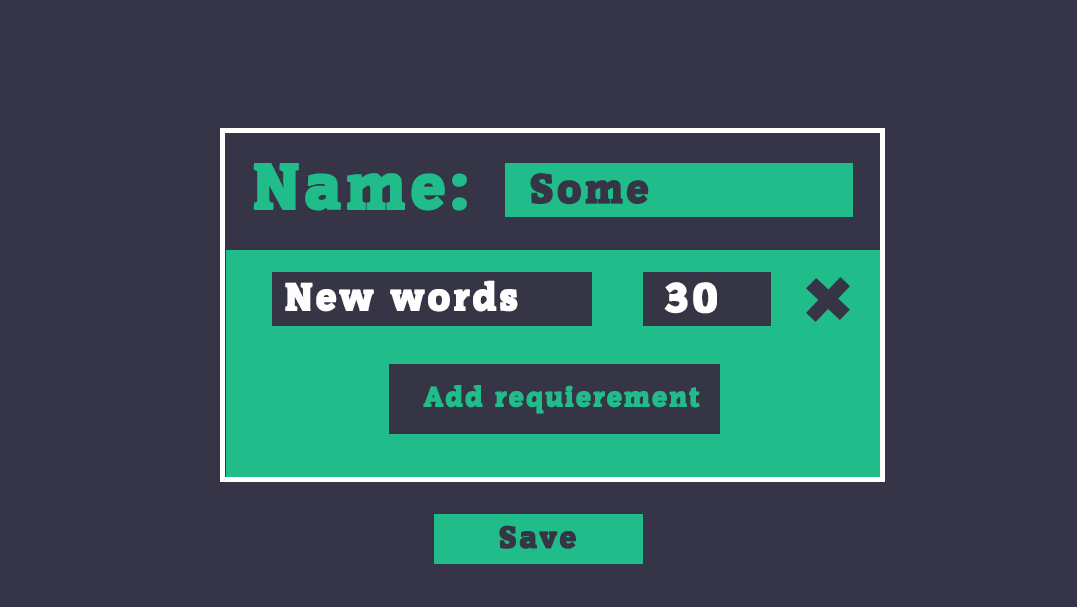
<style>
.page{position:relative;width:1077px;height:607px;background:#363547}
.page>*{position:absolute;margin:0}
.t1{font:62.4px "Commons";letter-spacing:0.07em;color:#20bc8a;font-weight:bold}
.t2{font:40px "Commons";letter-spacing:0.07em;color:#363546;font-weight:bold}
.t3{font:37.4px "Commons";letter-spacing:0.07em;color:#fefefe;font-weight:bold}
.t4{font:40px "Commons";letter-spacing:0.07em;color:#ffffff;font-weight:bold}
.t5{font:27.1px "Commons";letter-spacing:0.07em;color:#20bc8a;font-weight:bold}
.t6{font:30px "Commons";letter-spacing:0.07em;color:#363546;font-weight:bold}
</style>
<div class="page">
<p class="t1" style="left:253px;top:163px;width:214px;height:48px">Name:</p>
<p class="t2" style="left:530px;top:173px;width:119px;height:32px">Some</p>
<p class="t3" style="left:285px;top:280px;width:233px;height:32px">New words</p>
<p class="t4" style="left:664px;top:282px;width:53px;height:32px">30</p>
<p class="t5" style="left:423px;top:385px;width:277px;height:29px">Add requierement</p>
<p class="t6" style="left:499px;top:525px;width:77px;height:24px">Save</p>
</div>
